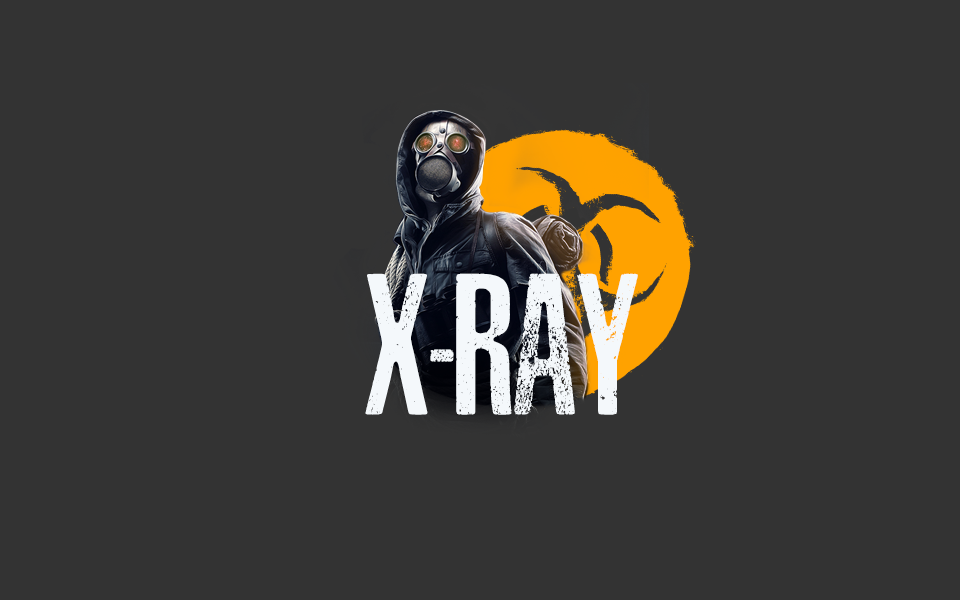
<style>
.page{position:relative;width:960px;height:600px;background:#333333}
.page>*{position:absolute;margin:0}
.t1{font:186px "ASPHALTICSCRATCHRUSBYLYAJKA";color:#f4f8fb}
</style>
<div class="page">
<p class="t1" style="left:365px;top:273px;width:273px;height:142px">X-RAY</p>
</div>
